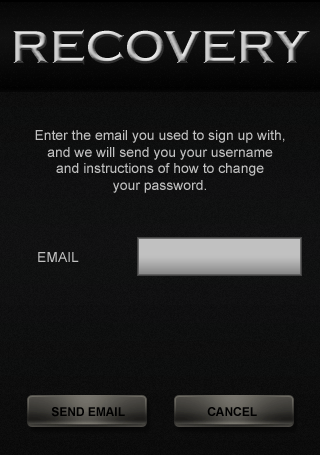
<style>
.page{position:relative;width:320px;height:455px}
.page>*{position:absolute;margin:0}
.t1{font:47.8px "CopperplateGothic-Bold"}
.t2{font:13.9px "ArialMT";color:#c1c1c1}
.t3{font:12px "Arial-BoldMT";color:#000000}
</style>
<div class="page">
<p class="t1" style="left:13px;top:29px;width:297px;height:36px">RECOVERY</p>
<p class="t2" style="left:35px;top:130px;width:250px;height:63px;text-align:center">Enter the email you used to sign up with,<br>and we will send you your username<br>and instructions of how to change<br>your password.</p>
<p class="t2" style="left:38px;top:252px;width:41px;height:10px">EMAIL</p>
<p class="t3" style="left:51px;top:407px;width:74px;height:10px">SEND EMAIL</p>
<p class="t3" style="left:207px;top:407px;width:50px;height:9px">CANCEL</p>
</div>
